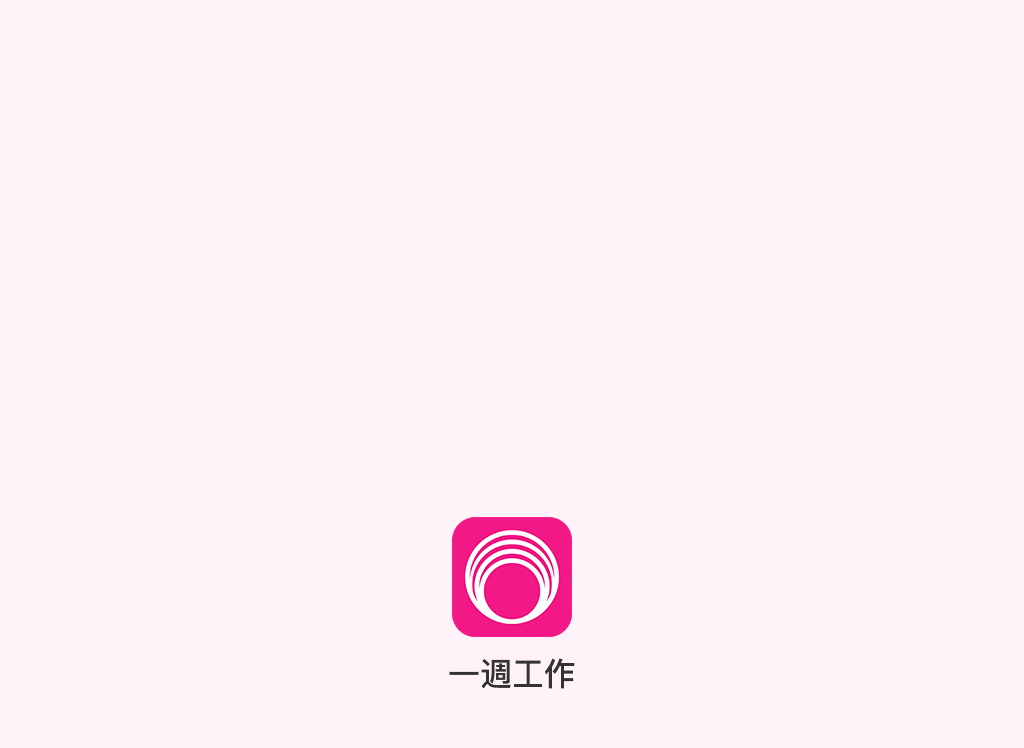
<style>
.page{position:relative;width:1024px;height:748px;background:#fff2f9}
.page>*{position:absolute;margin:0}
.t1{font:32px "PingFang-SC-Bold";color:#333333}
</style>
<div class="page">
<p class="t1" style="left:449px;top:658px;width:126px;height:31px">一週工作</p>
</div>
